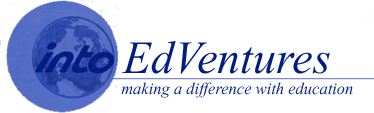
<style>
.page{position:relative;width:374px;height:113px;background:#ffffff}
.page>*{position:absolute;margin:0}
.t1{font:46px "TimesNewRomanPS-ItalicMT";color:#031c83}
.t2{font:16.6px "TimesNewRomanPS-ItalicMT";color:#082188}
</style>
<div class="page">
<p class="t1" style="left:121px;top:41px;width:209px;height:33px">EdVentures</p>
<p class="t2" style="left:121px;top:82px;width:232px;height:16px">making a difference with education</p>
</div>
